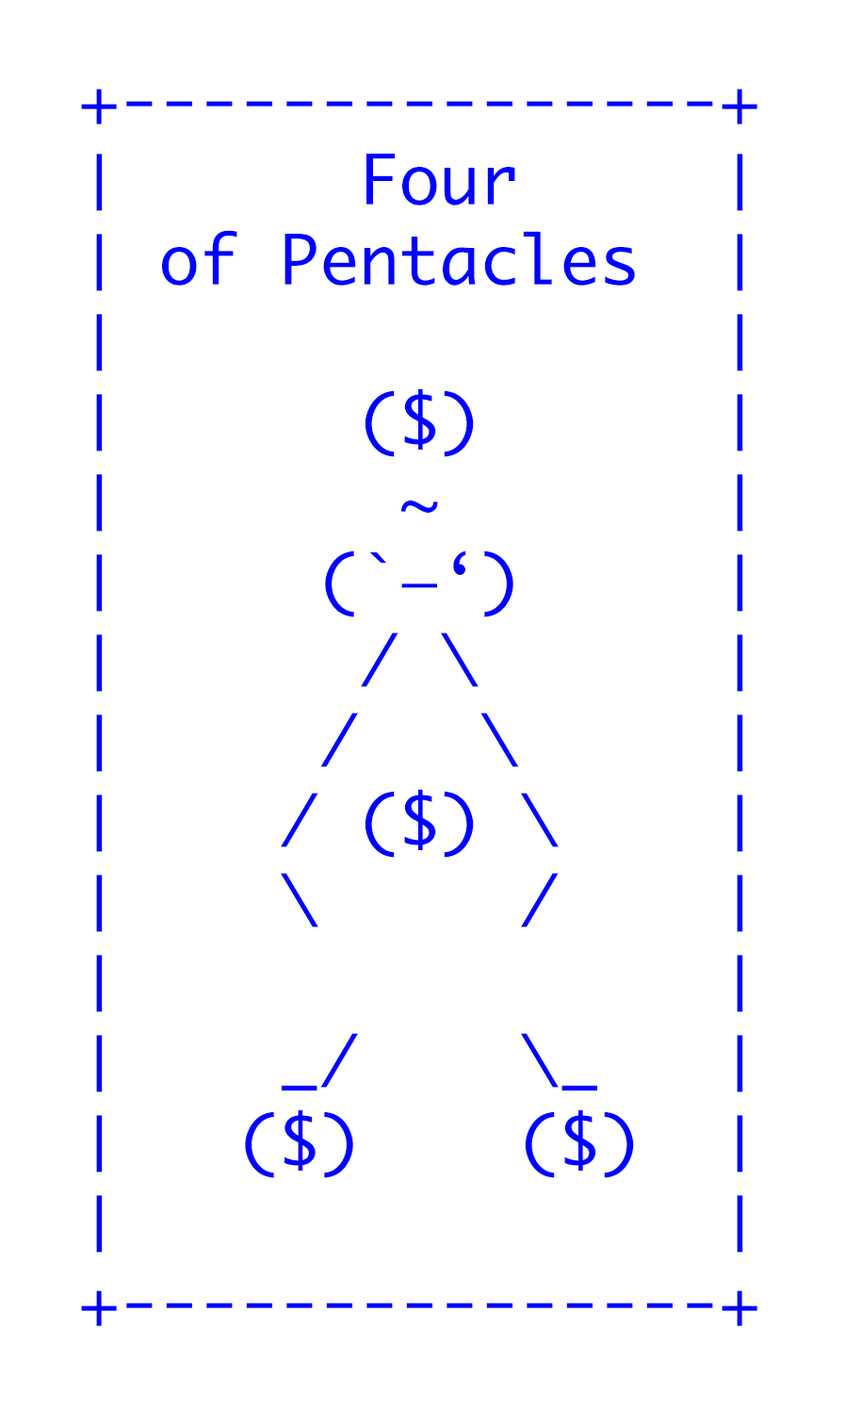
<style>
.page{position:relative;width:845px;height:1411px;background:#ffffff}
.page>*{position:absolute;margin:0}
.t1{font:66.7px "Monaco";color:#0000ff}
</style>
<div class="page">
<p class="t1" style="left:81px;top:89px;width:677px;height:1237px">+---------------+<br>│      Four     │<br>│ of Pentacles  │<br>│               │<br>│      ($)      │<br>│       ~       │<br>│     (`—‘)     │<br>│      / \      │ <br>│     /   \     │ <br>│    / ($) \    │ <br>│    \     /    │<br>│               │ <br>│    _/    \_   │<br>│   ($)    ($)  │<br>│               │<br>+---------------+</p>
</div>
